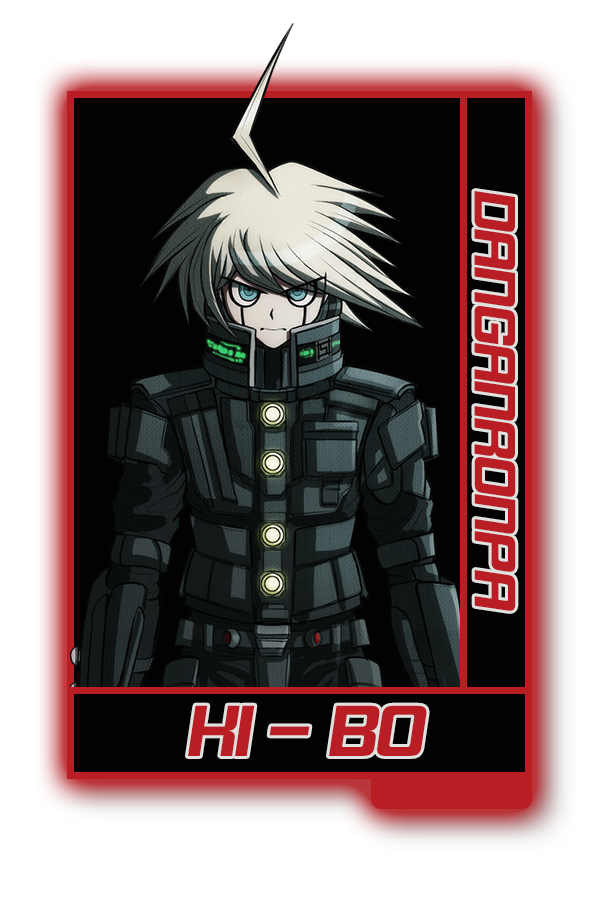
<style>
.page{position:relative;width:600px;height:900px;background:#020202}
.page>*{position:absolute;margin:0}
.t1{font:48.8px "DorBlue";color:#bb2c2e}
.t2{font:60.3px "DorBlue";color:#bb2c2e}
</style>
<div class="page">
<p class="t1" style="left:474px;top:191px;width:42px;height:420px;rotate:90deg">DANGANRONPA</p>
<p class="t2" style="left:188px;top:705px;width:239px;height:51px">K1 - B0</p>
</div>
